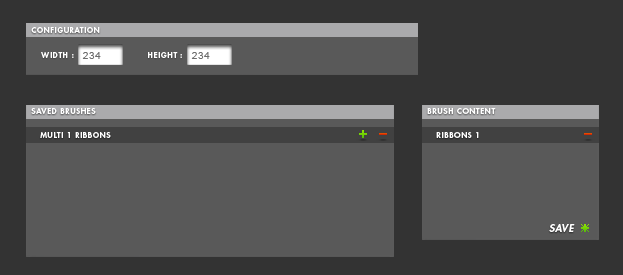
<style>
.page{position:relative;width:623px;height:275px;background:#595959}
.page>*{position:absolute;margin:0}
.t1{font:8px "FuturaStd-Heavy";letter-spacing:0.075em;color:#ffffff}
.t2{font:10px "ArialMT";letter-spacing:0.075em;color:#6d6d6d}
.t3{font:10px "FuturaStd-HeavyOblique";letter-spacing:0.075em;color:#ffffff}
</style>
<div class="page">
<p class="t1" style="left:31px;top:27px;width:69px;height:6px">CONFIGURATION</p>
<p class="t1" style="left:41px;top:52px;width:33px;height:6px">WIDTH :</p>
<p class="t2" style="left:82px;top:52px;width:19px;height:7px">234</p>
<p class="t1" style="left:148px;top:52px;width:34px;height:6px">HEIGHT :</p>
<p class="t2" style="left:191px;top:52px;width:19px;height:7px">234</p>
<p class="t1" style="left:31px;top:108px;width:65px;height:6px">SAVED BRUSHES</p>
<p class="t1" style="left:427px;top:108px;width:69px;height:6px">BRUSH CONTENT</p>
<p class="t1" style="left:40px;top:132px;width:71px;height:6px">MULTI 1 RIBBONS</p>
<p class="t1" style="left:436px;top:132px;width:43px;height:6px">RIBBONS 1</p>
<p class="t3" style="left:549px;top:224px;width:26px;height:8px">SAVE</p>
</div>
